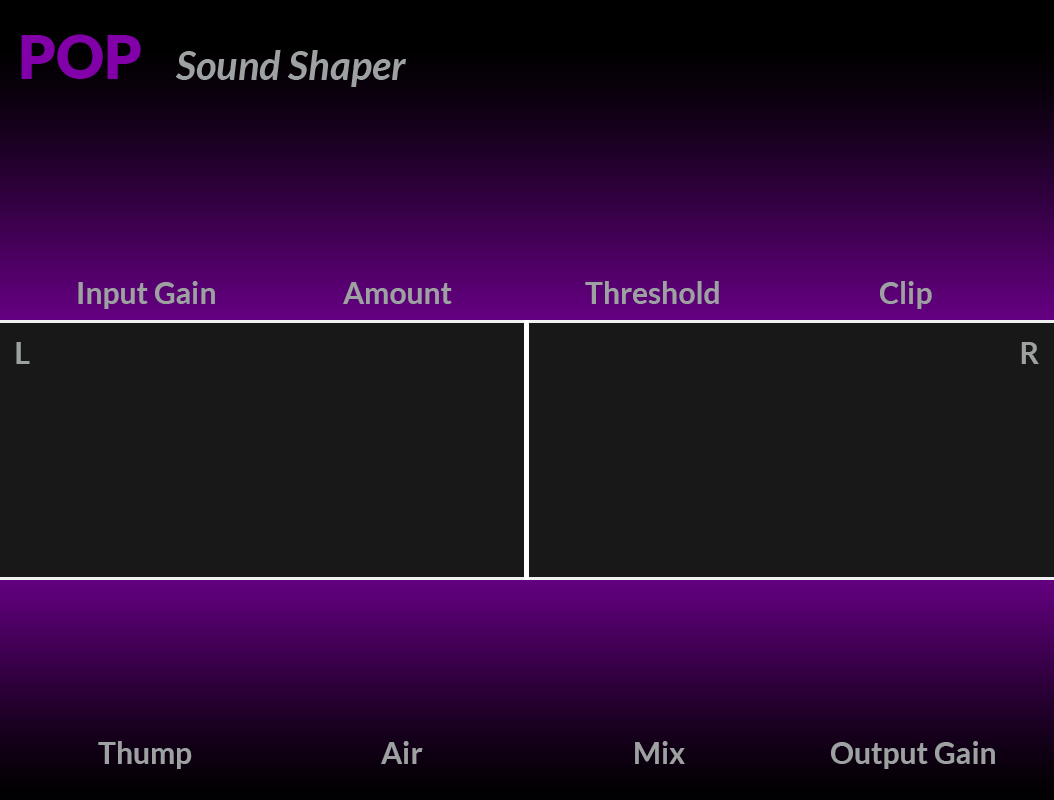
<style>
.page{position:relative;width:1054px;height:800px;background:#181818}
.page>*{position:absolute;margin:0}
.t1{font:30px "Lato-Bold";color:#9ea1a1}
</style>
<div class="page">
<p class="t1" style="left:78px;top:281px;width:137px;height:28px">Input Gain</p>
<p class="t1" style="left:585px;top:281px;width:134px;height:23px">Threshold</p>
<p class="t1" style="left:880px;top:281px;width:52px;height:28px">Clip</p>
<p class="t1" style="left:343px;top:282px;width:109px;height:22px">Amount</p>
<p class="t1" style="left:16px;top:342px;width:14px;height:22px">L</p>
<p class="t1" style="left:1021px;top:342px;width:18px;height:22px">R</p>
<p class="t1" style="left:98px;top:741px;width:94px;height:28px">Thump</p>
<p class="t1" style="left:381px;top:741px;width:42px;height:23px">Air</p>
<p class="t1" style="left:635px;top:741px;width:50px;height:23px">Mix</p>
<p class="t1" style="left:831px;top:741px;width:164px;height:28px">Output Gain</p>
</div>
